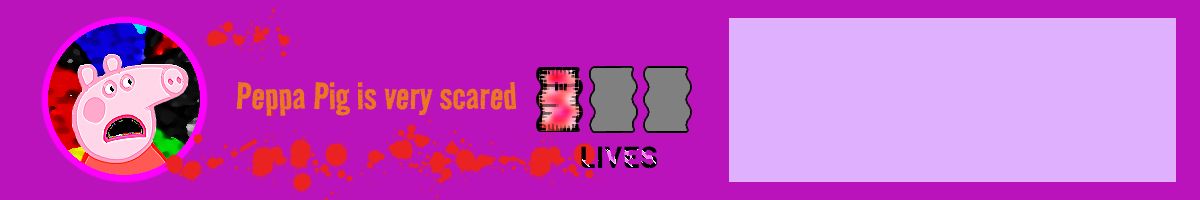
<style>
.page{position:relative;width:1200px;height:200px;background:#bb13bb}
.page>*{position:absolute;margin:0}
.t1{font:45px "WCRhesusABta";color:#eb2222}
.t2{font:45px "RoadRage-Regular";color:#eb7722}
</style>
<div class="page">
<p class="t1" style="left:199px;top:8px;width:111px;height:61px">2353</p>
<p class="t2" style="left:236px;top:81px;width:281px;height:35px">Peppa Pig is very scared</p>
</div>
